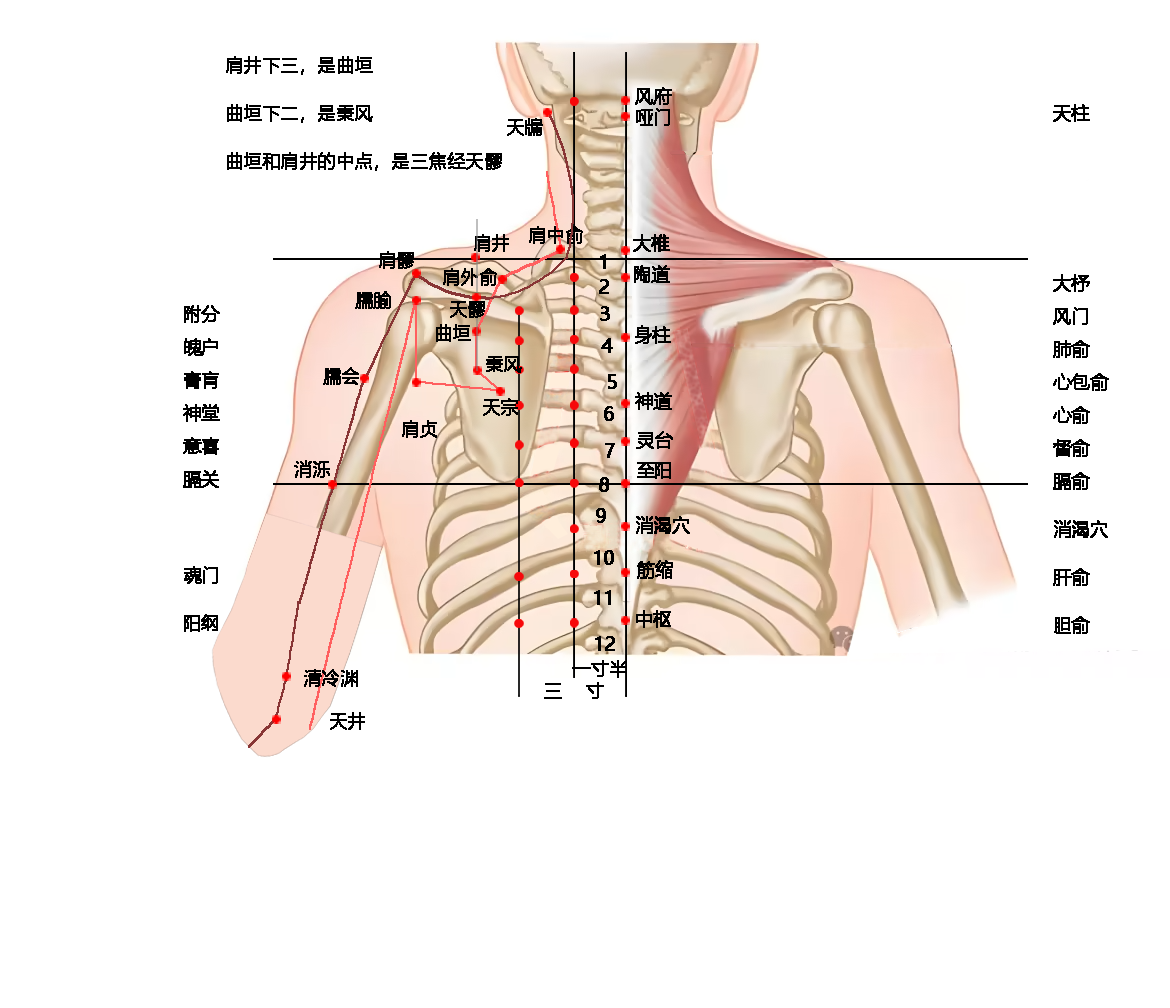
<style>
.page{position:relative;width:1170px;height:1008px;background:#ffffff}
.page>*{position:absolute;margin:0}
.t1{font:18px/48px "MicrosoftYaHeiLight";color:#000000;font-weight:bold}
.t2{font:18px "MicrosoftYaHei";color:#000000;font-weight:bold}
.t3{font:18px "MicrosoftYaHeiLight";color:#000000;font-weight:bold}
.t4{font:18px/33px "MicrosoftYaHei";color:#000000;font-weight:bold}
.t5{font:18px/48px "MicrosoftYaHei";color:#000000;font-weight:bold}
</style>
<div class="page">
<p class="t1" style="left:226px;top:56px;width:276px;height:115px">肩井下三，是曲垣<br>曲垣下二，是秉风<br>曲垣和肩井的中点，是三焦经天髎</p>
<p class="t2" style="left:635px;top:87px;width:37px;height:18px">风府</p>
<p class="t2" style="left:636px;top:108px;width:34px;height:18px">哑门</p>
<p class="t2" style="left:1053px;top:104px;width:37px;height:18px">天柱</p>
<p class="t3" style="left:507px;top:118px;width:36px;height:18px">天牖</p>
<p class="t3" style="left:529px;top:226px;width:54px;height:18px">肩中俞</p>
<p class="t3" style="left:474px;top:234px;width:35px;height:18px">肩井</p>
<p class="t2" style="left:633px;top:234px;width:37px;height:18px">大椎</p>
<p class="t3" style="left:379px;top:251px;width:35px;height:18px">肩髎</p>
<p class="t2" style="left:600px;top:254px;width:6px;height:15px">1</p>
<p class="t3" style="left:443px;top:268px;width:54px;height:18px">肩外俞</p>
<p class="t2" style="left:634px;top:265px;width:36px;height:18px">陶道</p>
<p class="t2" style="left:599px;top:279px;width:10px;height:15px">2</p>
<p class="t4" style="left:1053px;top:274px;width:56px;height:360px">大杼<br>风门<br>肺俞<br>心包俞<br>心俞<br>督俞<br>膈俞<br><span class="t5">消渴穴<br>肝俞<br>胆俞</span></p>
<p class="t3" style="left:355px;top:291px;width:36px;height:18px">臑腧</p>
<p class="t4" style="left:183px;top:305px;width:37px;height:327px">附分<br>魄户<br>膏肓<br>神堂<br>意喜<br>膈关<br><span class="t5"><br>魂门<br>阳纲</span></p>
<p class="t3" style="left:450px;top:301px;width:35px;height:17px">天髎</p>
<p class="t2" style="left:600px;top:306px;width:10px;height:15px">3</p>
<p class="t3" style="left:436px;top:324px;width:35px;height:18px">曲垣</p>
<p class="t2" style="left:635px;top:325px;width:36px;height:19px">身柱</p>
<p class="t2" style="left:601px;top:338px;width:12px;height:15px">4</p>
<p class="t3" style="left:486px;top:356px;width:36px;height:17px">秉风</p>
<p class="t3" style="left:323px;top:367px;width:36px;height:18px">臑会</p>
<p class="t2" style="left:608px;top:374px;width:9px;height:15px">5</p>
<p class="t3" style="left:483px;top:398px;width:35px;height:18px">天宗</p>
<p class="t2" style="left:635px;top:392px;width:37px;height:18px">神道</p>
<p class="t2" style="left:604px;top:406px;width:10px;height:15px">6</p>
<p class="t3" style="left:402px;top:420px;width:35px;height:18px">肩贞</p>
<p class="t2" style="left:636px;top:431px;width:37px;height:18px">灵台</p>
<p class="t2" style="left:605px;top:443px;width:10px;height:15px">7</p>
<p class="t3" style="left:294px;top:460px;width:36px;height:18px">消泺</p>
<p class="t2" style="left:637px;top:462px;width:34px;height:17px">至阳</p>
<p class="t2" style="left:599px;top:477px;width:10px;height:15px">8</p>
<p class="t2" style="left:596px;top:508px;width:10px;height:15px">9</p>
<p class="t2" style="left:636px;top:516px;width:54px;height:18px">消渴穴</p>
<p class="t2" style="left:594px;top:550px;width:20px;height:15px">10</p>
<p class="t2" style="left:637px;top:560px;width:36px;height:19px">筋缩</p>
<p class="t2" style="left:594px;top:590px;width:17px;height:15px">11</p>
<p class="t2" style="left:636px;top:610px;width:35px;height:18px">中枢</p>
<p class="t2" style="left:595px;top:636px;width:20px;height:15px">12</p>
<p class="t2" style="left:572px;top:660px;width:55px;height:18px">一寸半</p>
<p class="t3" style="left:304px;top:669px;width:54px;height:18px">清冷渊</p>
<p class="t2" style="left:544px;top:682px;width:60px;height:17px">三    寸</p>
<p class="t3" style="left:330px;top:712px;width:35px;height:18px">天井</p>
</div>
